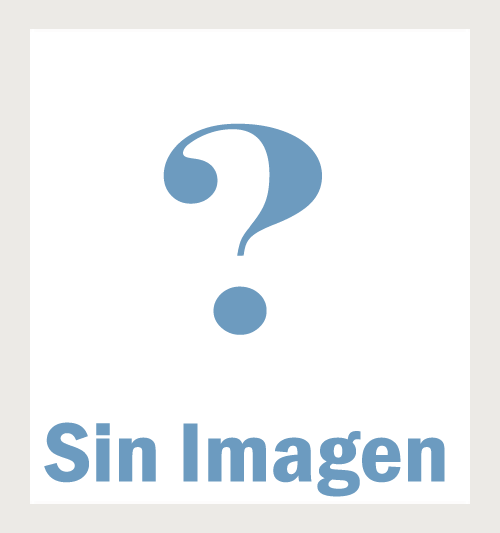
<style>
.page{position:relative;width:500px;height:533px;background:#ffffff}
.page>*{position:absolute;margin:0}
.t1{font:297.8px "EngraversMT";color:#6c9bc0;scale:1.1 1}
.t2{font:86.6px "FranklinGothic-DemiCond";color:#6c9bc0;scale:1.1 1}
</style>
<div class="page">
<p class="t1" style="left:163px;top:123px;width:159px;height:212px">?</p>
<p class="t2" style="left:44px;top:422px;width:401px;height:75px">Sin Imagen</p>
</div>
